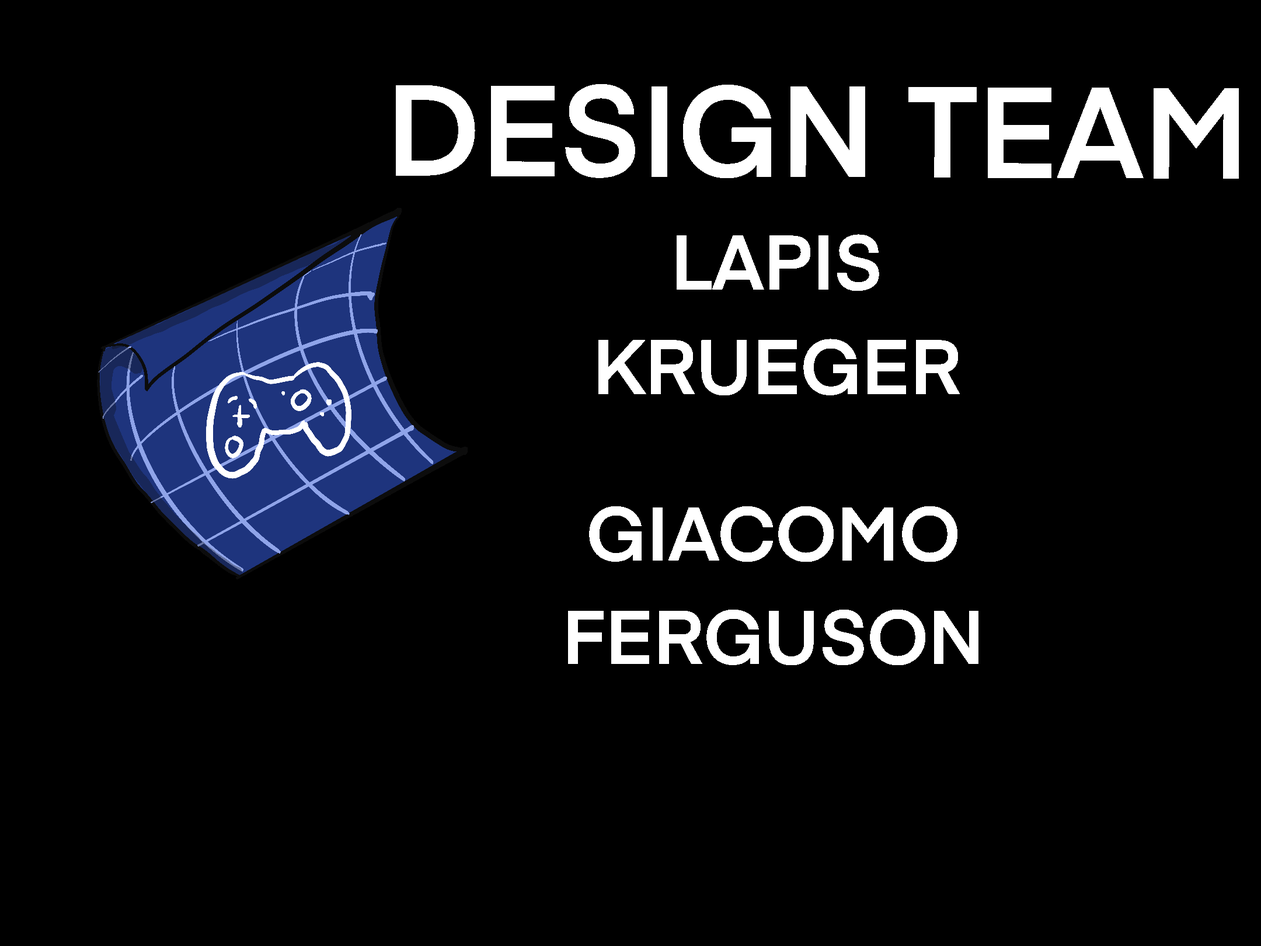
<style>
.page{position:relative;width:1261px;height:946px;background:#000000}
.page>*{position:absolute;margin:0}
.t1{font:126.4px "Eina01-SemiBold";color:#ffffff}
.t2{font:75.8px "Eina01-SemiBold";color:#ffffff}
.t3{font:74.7px "Eina01-SemiBold";color:#ffffff}
</style>
<div class="page">
<p class="t1" style="left:0px;top:0px;width:1261px;height:946px;text-align:center">DESIGN TEAM</p>
<p class="t2" style="left:0px;top:0px;width:1261px;height:946px;text-align:center">LAPIS KRUEGER</p>
<p class="t3" style="left:0px;top:0px;width:1261px;height:946px;text-align:center">GIACOMO FERGUSON</p>
</div>
